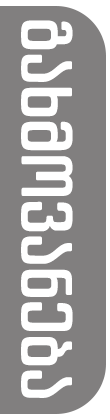
<style>
.page{position:relative;width:110px;height:420px;background:#817f7f}
.page>*{position:absolute;margin:0}
.t1{font:71.6px "ArchyEDT-Bold";letter-spacing:0.005em;color:#ffffff;scale:1.05 1}
</style>
<div class="page">
<p class="t1" style="left:21px;top:20px;width:52px;height:378px;rotate:90deg">გახმოვანება</p>
</div>
